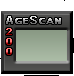
<style>
.page{position:relative;width:74px;height:76px}
.page>*{position:absolute;margin:0}
.t1{font:11px "Verdana";font-variant:small-caps;font-weight:bold}
.t2{font:9.9px "Verdana";font-variant:small-caps;font-weight:bold;scale:1.11 1}
</style>
<div class="page">
<p class="t1" style="left:6px;top:16px;width:55px;height:8px">AgeScan</p>
<p class="t2" style="left:6px;top:28px;width:6px;height:7px">2</p>
<p class="t2" style="left:6px;top:38px;width:6px;height:7px">0</p>
<p class="t2" style="left:6px;top:48px;width:6px;height:7px">0</p>
</div>
